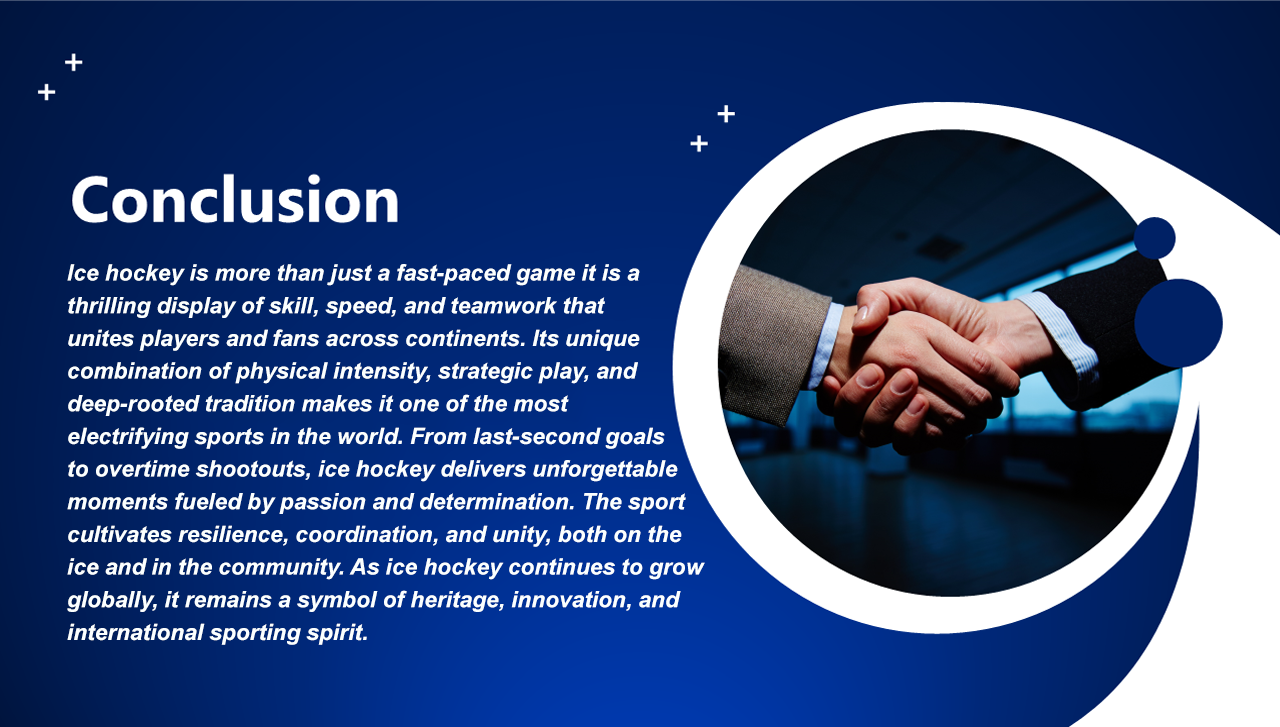
<style>
.page{position:relative;width:1280px;height:727px}
.page>*{position:absolute;margin:0}
.t1{font:22.7px/32.7px "Arial-BoldItalicMT";color:#fbffff}
</style>
<div class="page">
<p class="t1" style="left:67px;top:264px;width:638px;height:381px">Ice hockey is more than just a fast-paced game it is a <br>thrilling display of skill, speed, and teamwork that<br>unites players and fans across continents. Its unique <br>combination of physical intensity, strategic play, and <br>deep-rooted tradition makes it one of the most <br>electrifying sports in the world. From last-second goals <br>to overtime shootouts, ice hockey delivers unforgettable<br>moments fueled by passion and determination. The sport<br>cultivates resilience, coordination, and unity, both on the<br>ice and in the community. As ice hockey continues to grow<br>globally, it remains a symbol of heritage, innovation, and <br>international sporting spirit.</p>
</div>
